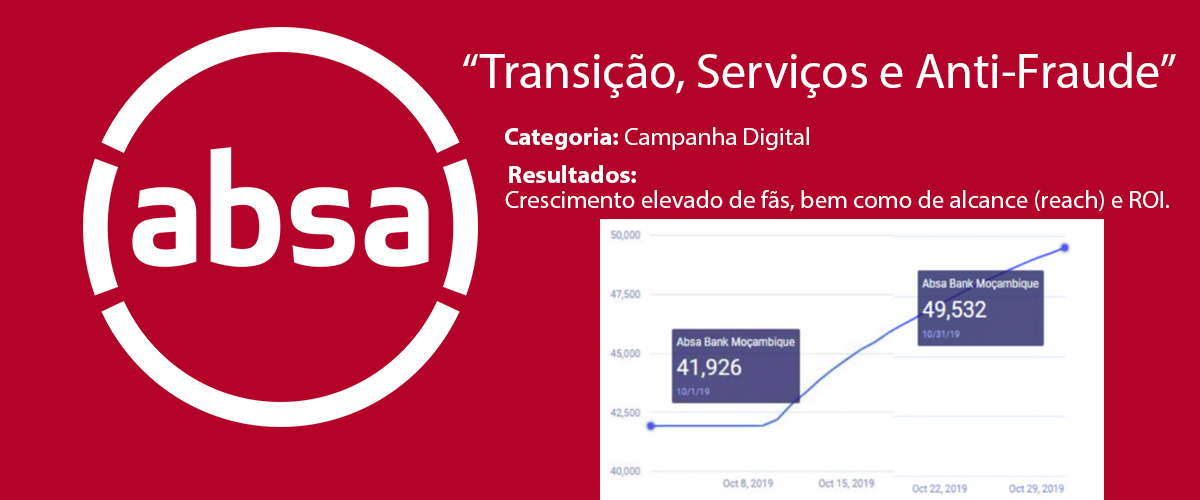
<style>
.page{position:relative;width:1200px;height:500px;background:#b30329}
.page>*{position:absolute;margin:0}
.t1{font:12px "MyriadPro-Regular";color:#ffffff}
.t2{font:25px "MyriadPro-Regular";color:#ffffff}
.t3{font:25px "MyriadPro-Bold";color:#ffffff}
</style>
<div class="page">
<p class="t1" style="left:463px;top:52px;width:713px;height:46px">“Transição, Serviços e Anti-Fraude”</p>
<p class="t2" style="left:505px;top:127px;width:304px;height:23px"><span class="t3">Categoria: </span>Campanha Digital</p>
<p class="t3" style="left:509px;top:165px;width:127px;height:18px">Resultados:</p>
<p class="t2" style="left:505px;top:190px;width:664px;height:22px">Crescimento elevado de fãs, bem como de alcance (reach) e ROI.</p>
</div>
